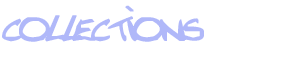
<style>
.page{position:relative;width:300px;height:60px;background:#ffffff}
.page>*{position:absolute;margin:0}
.t1{font:60px "Texted'critureLanfeust";color:#b0b8f9}
</style>
<div class="page">
<p class="t1" style="left:2px;top:5px;width:202px;height:37px">collections</p>
</div>
